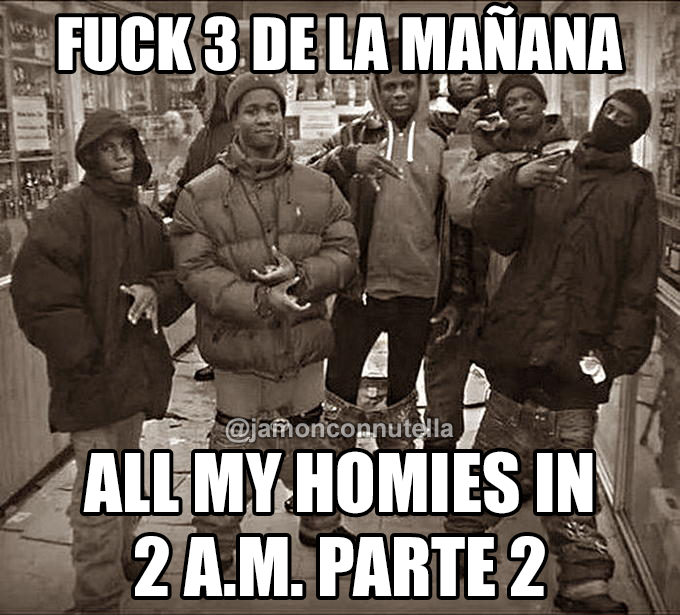
<style>
.page{position:relative;width:680px;height:615px}
.page>*{position:absolute;margin:0}
.t1{font:66.8px "Impact";color:#ffffff}
.t2{font:25.7px "Arial-BoldMT";color:#a49f9c}
.t3{font:74.5px "Impact";color:#ffffff}
</style>
<div class="page">
<p class="t1" style="left:58px;top:5px;width:565px;height:66px">FUCK 3 DE LA MAÑANA</p>
<p class="t2" style="left:225px;top:418px;width:229px;height:25px">@jamonconnutella</p>
<p class="t3" style="left:83px;top:451px;width:510px;height:145px;text-align:center">ALL MY HOMIES IN<br>2 A.M. PARTE 2</p>
</div>
